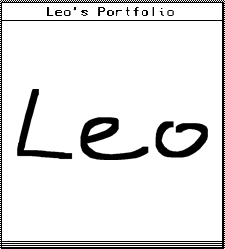
<style>
.page{position:relative;width:225px;height:249px;background:#ffffff}
.page>*{position:absolute;margin:0}
.t1{font:13px "VCROSDMono";letter-spacing:0.075em;color:#000000}
</style>
<div class="page">
<p class="t1" style="left:47px;top:7px;width:127px;height:9px">Leo’s Portfolio</p>
</div>
